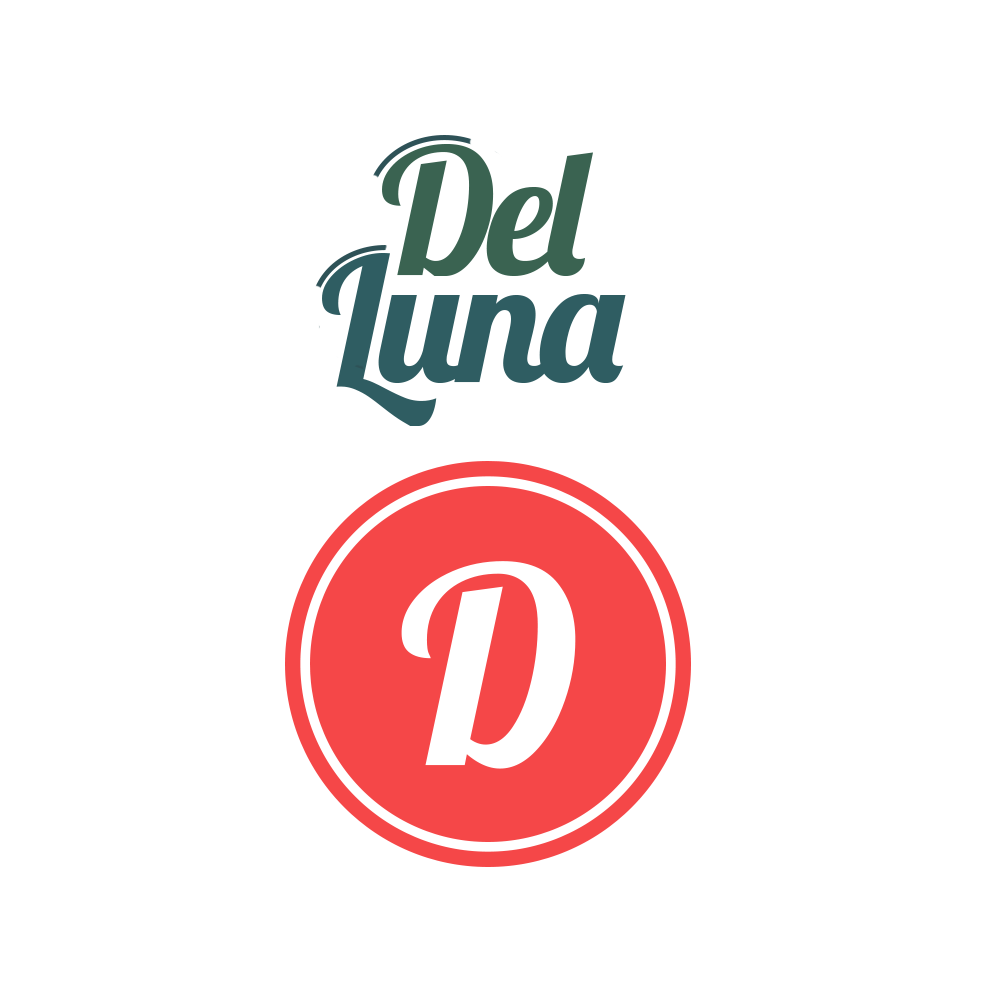
<style>
.page{position:relative;width:1000px;height:1000px;background:#ffffff}
.page>*{position:absolute;margin:0}
.t1{font:173.8px "Lobster-Regular";letter-spacing:-0.04em;color:#3a6351}
.t2{font:173.8px "Lobster-Regular";letter-spacing:-0.04em;color:#2f5d62}
</style>
<div class="page">
<p class="t1" style="left:382px;top:144px;width:211px;height:132px">Del</p>
<p class="t2" style="left:322px;top:253px;width:304px;height:173px">Luna</p>
</div>
